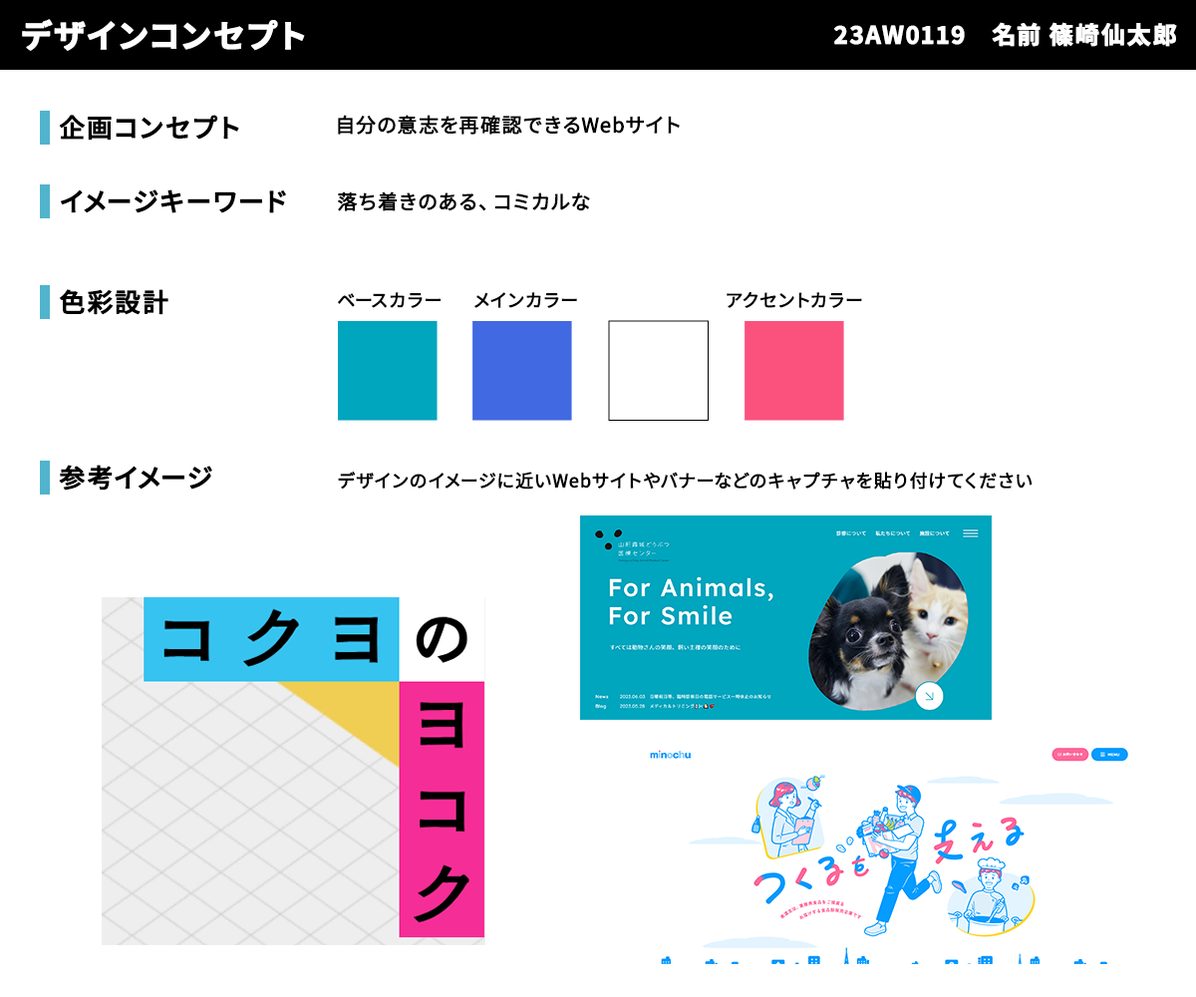
<style>
.page{position:relative;width:1196px;height:997px;background:#ffffff}
.page>*{position:absolute;margin:0}
.t1{font:31.9px "NotoSansJP-Bold";letter-spacing:0.04em;color:#ffffff;font-weight:bold}
.t2{font:23.9px "NotoSansJP-Bold";letter-spacing:0.04em;color:#ffffff;font-weight:bold}
.t3{font:25.9px "NotoSansJP-Medium";letter-spacing:0.04em;color:#000000;font-weight:bold}
.t4{font:19.9px "NotoSansJP-Regular";letter-spacing:0.04em;color:#000000;font-weight:bold}
.t5{font:17.9px "NotoSansJP-Regular";letter-spacing:0.04em;color:#000000;font-weight:bold}
</style>
<div class="page">
<p class="t1" style="left:22px;top:19px;width:283px;height:32px">デザインコンセプト</p>
<p class="t2" style="left:834px;top:22px;width:343px;height:25px">23AW0119　名前 篠崎仙太郎</p>
<p class="t3" style="left:59px;top:115px;width:180px;height:26px">企画コンセプト</p>
<p class="t4" style="left:338px;top:115px;width:342px;height:20px">自分の意志を再確認できるWebサイト</p>
<p class="t3" style="left:61px;top:189px;width:225px;height:24px">イメージキーワード</p>
<p class="t4" style="left:338px;top:191px;width:252px;height:20px">落ち着きのある、コミカルな</p>
<p class="t3" style="left:60px;top:289px;width:108px;height:26px">色彩設計</p>
<p class="t5" style="left:338px;top:292px;width:103px;height:16px">ベースカラー</p>
<p class="t5" style="left:474px;top:292px;width:103px;height:16px">メインカラー</p>
<p class="t5" style="left:727px;top:291px;width:135px;height:17px">アクセントカラー</p>
<p class="t3" style="left:59px;top:465px;width:153px;height:25px">参考イメージ</p>
<p class="t5" style="left:338px;top:472px;width:695px;height:17px">デザインのイメージに近いWebサイトやバナーなどのキャプチャを貼り付けてください</p>
</div>
